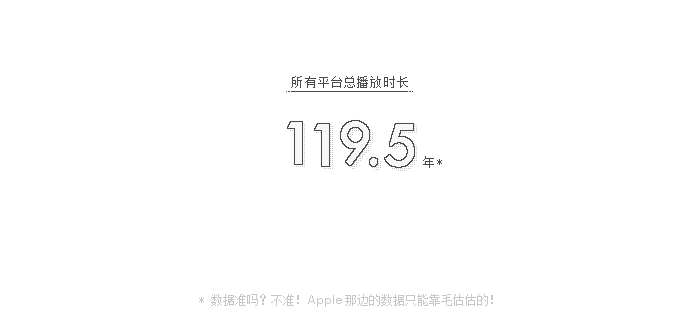
<style>
.page{position:relative;width:700px;height:326px;background:#ffffff}
.page>*{position:absolute;margin:0}
.t1{font:12px "FZXS12--GB1-0";letter-spacing:0.1em;color:#4a4a4a}
.t2{font:12px "FZXS12--GB1-0";color:#c7c7c7}
.t3{font:12px "Avenir-Book";color:#c7c7c7}
</style>
<div class="page">
<p class="t1" style="left:291px;top:76px;width:117px;height:12px">所有平台总播放时长</p>
<p class="t1" style="left:423px;top:156px;width:19px;height:12px">年*</p>
<p class="t2" style="left:199px;top:294px;width:294px;height:13px">* 数据准吗？不准！<span class="t3">Apple </span>那边的数据只能靠毛估估的！</p>
</div>
